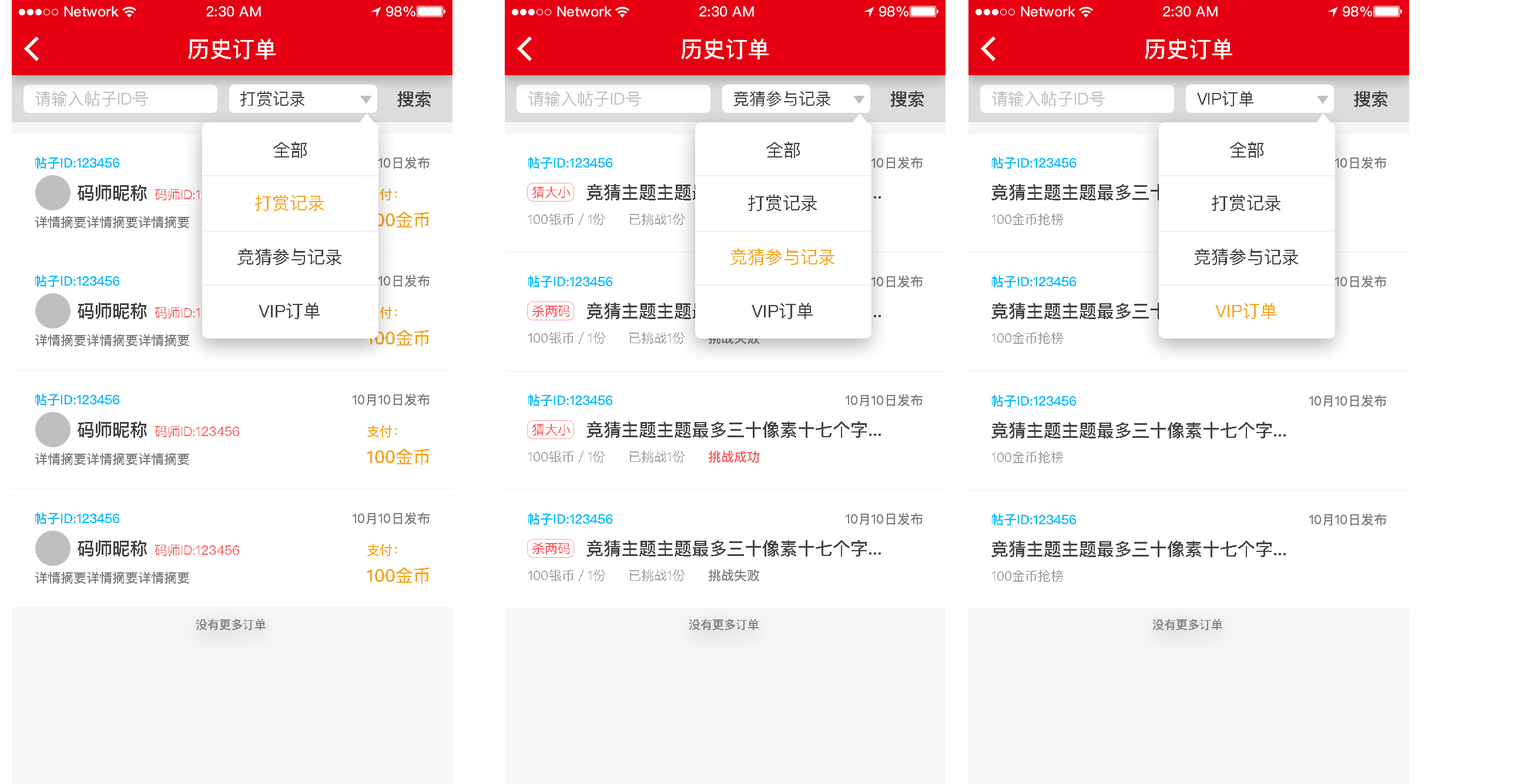
<style>
.page{position:relative;width:1522px;height:784px;background:#ffffff}
.page>*{position:absolute;margin:0}
.t1{font:22.3px "PingFangSC-Medium";color:#ffffff;text-transform:uppercase}
.t2{font:16.4px "PingFangSC-Regular";color:#bfbfbf;text-transform:uppercase}
.t3{font:16.4px "PingFangSC-Regular";color:#434343;text-transform:uppercase}
.t4{font:17.6px "PingFangSC-Medium";color:#434343;text-transform:uppercase}
.t5{font:17.6px "PingFangSC-Regular";color:#434343;text-transform:uppercase}
.t6{font:12.9px "PingFangSC-Medium";color:#01b9fd;text-transform:uppercase}
.t7{font:12.9px "PingFangSC-Medium";color:#7d7d7d;text-transform:uppercase}
.t8{font:17.6px "PingFangSC-Medium";text-transform:uppercase}
.t9{font:12.9px "PingFangSC-Regular";text-transform:uppercase}
.t10{font:17.6px "PingFangSC-Regular";color:#f5a623;text-transform:uppercase}
.t11{font:12.9px "PingFangSC-Medium";text-transform:uppercase}
.t12{font:12.9px "PingFangSC-Regular";color:#ff5858;text-transform:uppercase}
.t13{font:17.6px "PingFangSC-Medium";color:#f6a623;text-transform:uppercase}
.t14{font:12.9px "PingFangSC-Regular";color:#a0a0a0;text-transform:uppercase}
.t15{font:12.9px "PingFangSC-Medium";color:#a0a0a0;text-transform:uppercase}
.t16{font:12.9px "PingFangSC-Medium";color:#f6a623;text-transform:uppercase}
.t17{font:12.9px "PingFangSC-Medium";color:#ff5858;text-transform:uppercase}
.t18{font:12.9px "PingFangSC-Medium";color:#808080;text-transform:uppercase}
.t19{font:11.7px "PingFangSC-Medium";color:#7d7d7d;text-transform:uppercase}
</style>
<div class="page">
<p class="t1" style="left:188px;top:38px;width:88px;height:21px">历史订单</p>
<p class="t1" style="left:681px;top:38px;width:87px;height:21px">历史订单</p>
<p class="t1" style="left:1144px;top:38px;width:88px;height:21px">历史订单</p>
<p class="t2" style="left:35px;top:91px;width:113px;height:15px">请输入帖子id号</p>
<p class="t3" style="left:240px;top:91px;width:64px;height:15px">打赏记录</p>
<p class="t4" style="left:397px;top:90px;width:34px;height:17px">搜索</p>
<p class="t2" style="left:528px;top:91px;width:113px;height:15px">请输入帖子id号</p>
<p class="t3" style="left:733px;top:91px;width:97px;height:15px">竞猜参与记录</p>
<p class="t4" style="left:890px;top:90px;width:34px;height:17px">搜索</p>
<p class="t2" style="left:992px;top:91px;width:112px;height:15px">请输入帖子id号</p>
<p class="t3" style="left:1197px;top:91px;width:56px;height:15px">VIP订单</p>
<p class="t4" style="left:1354px;top:90px;width:33px;height:17px">搜索</p>
<p class="t5" style="left:273px;top:142px;width:34px;height:16px">全部</p>
<p class="t5" style="left:766px;top:142px;width:34px;height:16px">全部</p>
<p class="t5" style="left:1230px;top:142px;width:33px;height:16px">全部</p>
<p class="t6" style="left:35px;top:157px;width:84px;height:12px">帖子id:123456</p>
<p class="t7" style="left:352px;top:157px;width:77px;height:12px">10月10日发布</p>
<p class="t6" style="left:528px;top:157px;width:84px;height:12px">帖子id:123456</p>
<p class="t7" style="left:845px;top:157px;width:77px;height:12px">10月10日发布</p>
<p class="t6" style="left:992px;top:157px;width:84px;height:12px">帖子id:123456</p>
<p class="t7" style="left:1309px;top:157px;width:77px;height:12px">10月10日发布</p>
<p class="t4" style="left:78px;top:184px;width:69px;height:17px">码师昵称</p>
<p class="t8" style="left:586px;top:184px;width:295px;height:16px">竞猜主题主题最多三十像素十七个字...</p>
<p class="t4" style="left:991px;top:184px;width:294px;height:16px">竞猜主题主题最多三十像素十七个字...</p>
<p class="t9" style="left:155px;top:189px;width:84px;height:11px">码师id:123456</p>
<p class="t10" style="left:255px;top:194px;width:69px;height:17px">打赏记录</p>
<p class="t11" style="left:367px;top:189px;width:30px;height:11px">支付：</p>
<p class="t12" style="left:532px;top:186px;width:38px;height:12px">猜大小</p>
<p class="t5" style="left:748px;top:194px;width:69px;height:17px">打赏记录</p>
<p class="t5" style="left:1211px;top:194px;width:69px;height:17px">打赏记录</p>
<p class="t7" style="left:35px;top:216px;width:154px;height:12px">详情摘要详情摘要详情摘要</p>
<p class="t13" style="left:367px;top:211px;width:62px;height:17px">100金币</p>
<p class="t14" style="left:528px;top:213px;width:77px;height:12px">100银币／1份</p>
<p class="t14" style="left:629px;top:213px;width:55px;height:12px">已挑战1份</p>
<p class="t14" style="left:992px;top:213px;width:71px;height:12px">100金币抢榜</p>
<p class="t5" style="left:237px;top:249px;width:104px;height:16px">竞猜参与记录</p>
<p class="t10" style="left:730px;top:249px;width:104px;height:16px">竞猜参与记录</p>
<p class="t5" style="left:1194px;top:249px;width:104px;height:16px">竞猜参与记录</p>
<p class="t6" style="left:35px;top:275px;width:84px;height:12px">帖子id:123456</p>
<p class="t7" style="left:352px;top:275px;width:77px;height:12px">10月10日发布</p>
<p class="t6" style="left:528px;top:276px;width:84px;height:11px">帖子id:123456</p>
<p class="t7" style="left:845px;top:276px;width:77px;height:11px">10月10日发布</p>
<p class="t6" style="left:992px;top:276px;width:84px;height:11px">帖子id:123456</p>
<p class="t7" style="left:1309px;top:276px;width:77px;height:11px">10月10日发布</p>
<p class="t4" style="left:78px;top:303px;width:69px;height:16px">码师昵称</p>
<p class="t5" style="left:258px;top:303px;width:62px;height:16px">VIP订单</p>
<p class="t12" style="left:532px;top:305px;width:37px;height:12px">杀两码</p>
<p class="t8" style="left:586px;top:303px;width:295px;height:16px">竞猜主题主题最多三十像素十七个字...</p>
<p class="t5" style="left:751px;top:303px;width:61px;height:16px">VIP订单</p>
<p class="t4" style="left:991px;top:303px;width:294px;height:16px">竞猜主题主题最多三十像素十七个字...</p>
<p class="t10" style="left:1215px;top:303px;width:61px;height:16px">VIP订单</p>
<p class="t9" style="left:155px;top:307px;width:84px;height:11px">码师id:123456</p>
<p class="t11" style="left:367px;top:307px;width:30px;height:11px">支付：</p>
<p class="t13" style="left:367px;top:330px;width:62px;height:16px">100金币</p>
<p class="t7" style="left:35px;top:334px;width:154px;height:12px">详情摘要详情摘要详情摘要</p>
<p class="t14" style="left:528px;top:332px;width:77px;height:12px"><span class="t15">1</span>00银币／1份</p>
<p class="t14" style="left:629px;top:332px;width:55px;height:12px">已挑战1份</p>
<p class="t11" style="left:708px;top:332px;width:51px;height:12px">挑战失败</p>
<p class="t14" style="left:992px;top:332px;width:71px;height:12px">100金币抢榜</p>
<p class="t6" style="left:35px;top:394px;width:84px;height:11px">帖子id:123456</p>
<p class="t7" style="left:352px;top:394px;width:77px;height:11px">10月10日发布</p>
<p class="t6" style="left:528px;top:394px;width:84px;height:12px">帖子id:123456</p>
<p class="t7" style="left:845px;top:394px;width:77px;height:12px">10月10日发布</p>
<p class="t6" style="left:992px;top:395px;width:84px;height:12px">帖子id:123456</p>
<p class="t7" style="left:1309px;top:395px;width:77px;height:12px">10月10日发布</p>
<p class="t4" style="left:78px;top:421px;width:69px;height:17px">码师昵称</p>
<p class="t12" style="left:155px;top:425px;width:84px;height:12px">码师id:123456</p>
<p class="t16" style="left:367px;top:425px;width:30px;height:12px">支付：</p>
<p class="t12" style="left:532px;top:424px;width:38px;height:11px">猜大小</p>
<p class="t4" style="left:586px;top:421px;width:295px;height:17px">竞猜主题主题最多三十像素十七个字...</p>
<p class="t4" style="left:991px;top:422px;width:294px;height:16px">竞猜主题主题最多三十像素十七个字...</p>
<p class="t13" style="left:367px;top:448px;width:62px;height:17px">100金币</p>
<p class="t7" style="left:35px;top:453px;width:154px;height:12px">详情摘要详情摘要详情摘要</p>
<p class="t14" style="left:528px;top:451px;width:77px;height:11px">100银币／1份</p>
<p class="t14" style="left:629px;top:451px;width:55px;height:11px">已挑战1份</p>
<p class="t17" style="left:708px;top:451px;width:51px;height:11px">挑战成功</p>
<p class="t14" style="left:992px;top:451px;width:71px;height:12px">100金币抢榜</p>
<p class="t6" style="left:35px;top:512px;width:84px;height:12px">帖子id:123456</p>
<p class="t7" style="left:352px;top:512px;width:77px;height:12px">10月10日发布</p>
<p class="t6" style="left:528px;top:513px;width:84px;height:12px">帖子id:123456</p>
<p class="t7" style="left:845px;top:513px;width:77px;height:12px">10月10日发布</p>
<p class="t6" style="left:992px;top:513px;width:84px;height:12px">帖子id:123456</p>
<p class="t7" style="left:1309px;top:513px;width:77px;height:12px">10月10日发布</p>
<p class="t4" style="left:78px;top:540px;width:69px;height:16px">码师昵称</p>
<p class="t12" style="left:155px;top:544px;width:84px;height:12px">码师id:123456</p>
<p class="t16" style="left:367px;top:544px;width:30px;height:12px">支付：</p>
<p class="t12" style="left:532px;top:542px;width:37px;height:12px">杀两码</p>
<p class="t4" style="left:586px;top:540px;width:295px;height:16px">竞猜主题主题最多三十像素十七个字...</p>
<p class="t4" style="left:991px;top:540px;width:294px;height:17px">竞猜主题主题最多三十像素十七个字...</p>
<p class="t13" style="left:367px;top:567px;width:62px;height:16px">100金币</p>
<p class="t14" style="left:528px;top:569px;width:77px;height:12px"><span class="t15">1</span>00银币／1份</p>
<p class="t14" style="left:629px;top:569px;width:55px;height:12px">已挑战1份</p>
<p class="t18" style="left:708px;top:569px;width:51px;height:12px">挑战失败</p>
<p class="t14" style="left:992px;top:570px;width:71px;height:12px">100金币抢榜</p>
<p class="t7" style="left:35px;top:572px;width:154px;height:11px">详情摘要详情摘要详情摘要</p>
<p class="t19" style="left:196px;top:619px;width:70px;height:11px">没有更多订单</p>
<p class="t19" style="left:689px;top:619px;width:69px;height:11px">没有更多订单</p>
<p class="t19" style="left:1153px;top:619px;width:69px;height:11px">没有更多订单</p>
</div>
